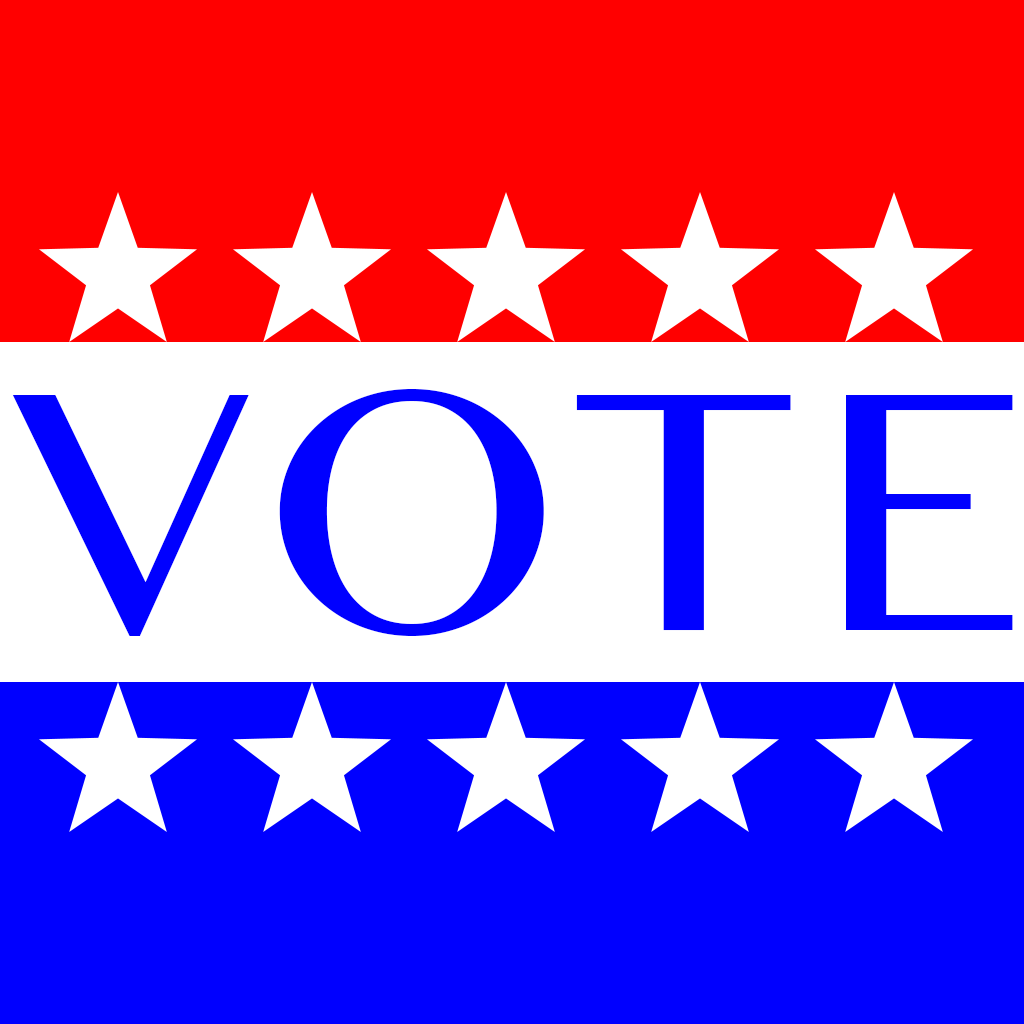
<style>
.page{position:relative;width:1024px;height:1024px;background:#ffffff}
.page>*{position:absolute;margin:0}
.t1{font:345.7px "MyanmarMN";letter-spacing:0.05em;color:#0000ff}
</style>
<div class="page">
<p class="t1" style="left:12px;top:389px;width:1001px;height:247px">VOTE</p>
</div>
